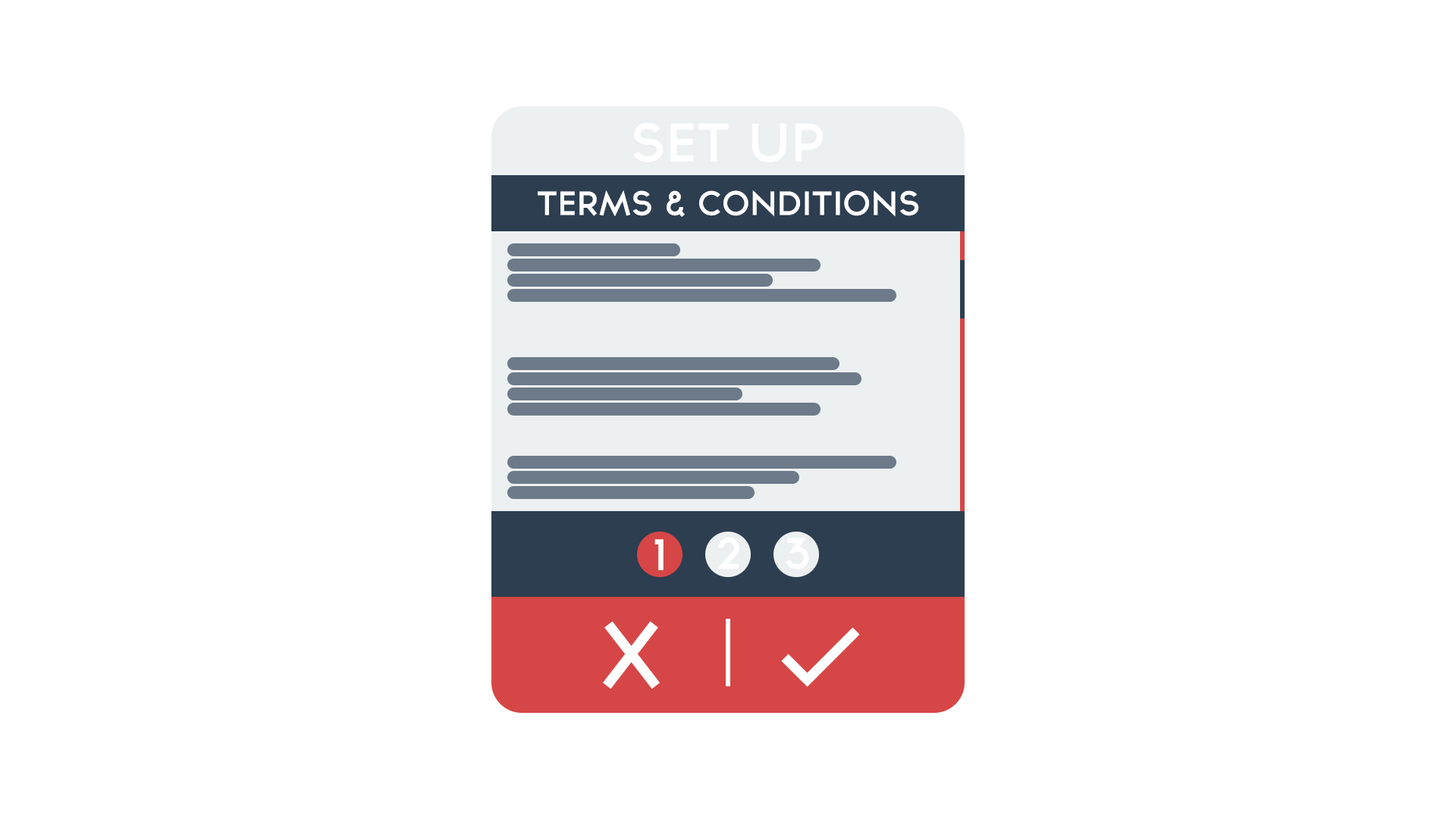
<style>
.page{position:relative;width:1456px;height:819px;background:#ffffff}
.page>*{position:absolute;margin:0}
.t1{font:48.5px "TYPOGRAPHPRO-SemiBold";color:#ffffff}
.t2{font:30.3px "TYPOGRAPHPRO-SemiBold";color:#ffffff}
</style>
<div class="page">
<p class="t1" style="left:633px;top:123px;width:190px;height:39px">SET UP</p>
<p class="t2" style="left:538px;top:190px;width:381px;height:27px">TERMS &amp; CONDITIONS</p>
</div>
